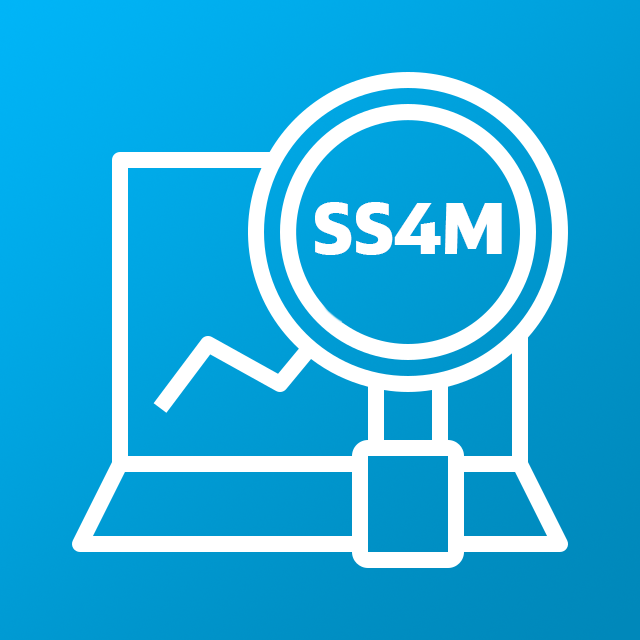
<style>
.page{position:relative;width:640px;height:640px}
.page>*{position:absolute;margin:0}
.t1{font:69.8px "DBHead-Black";color:#ffffff}
</style>
<div class="page">
<p class="t1" style="left:315px;top:202px;width:187px;height:53px">SS4M</p>
</div>
